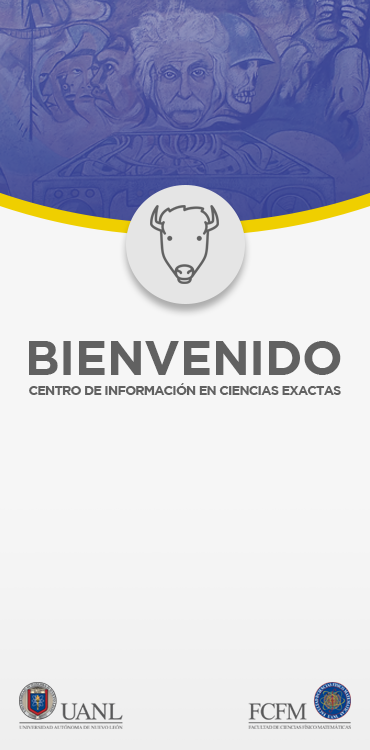
<style>
.page{position:relative;width:370px;height:750px;background:#f6f6f6}
.page>*{position:absolute;margin:0}
.t1{font:47.5px "GothamBold";color:#616161;text-transform:uppercase}
.t2{font:12.5px "GothamBold";letter-spacing:-0.04em;color:#616161;text-transform:uppercase}
</style>
<div class="page">
<p class="t1" style="left:29px;top:341px;width:312px;height:34px">BIENVENIDO</p>
<p class="t2" style="left:29px;top:383px;width:312px;height:12px">Centro de Información en Ciencias Exactas</p>
</div>
